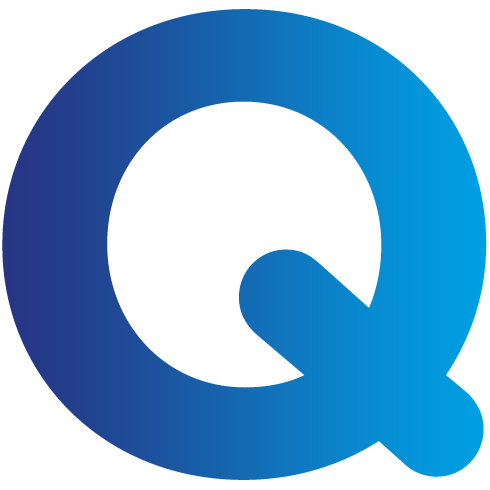
<style>
.page{position:relative;width:490px;height:490px;background:#ffffff}
.page>*{position:absolute;margin:0}
.t1{font:650px "GothamRounded-Bold"}
</style>
<div class="page">
<p class="t1" style="left:2px;top:9px;width:485px;height:471px">Q</p>
</div>
